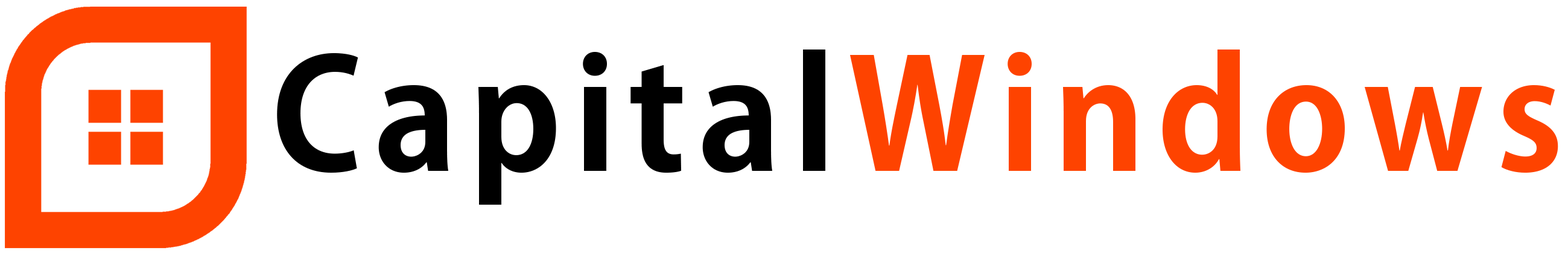
<style>
.page{position:relative;width:1568px;height:256px;background:#ffffff}
.page>*{position:absolute;margin:0}
.t1{font:150.8px "KozGoPr6N-Bold";letter-spacing:0.08em;color:#000000}
.t2{font:150.8px "KozGoPr6N-Bold";letter-spacing:0.08em;color:#fe4300}
</style>
<div class="page">
<p class="t1" style="left:277px;top:49px;width:1281px;height:156px">Capital<span class="t2">Windows</span></p>
</div>
